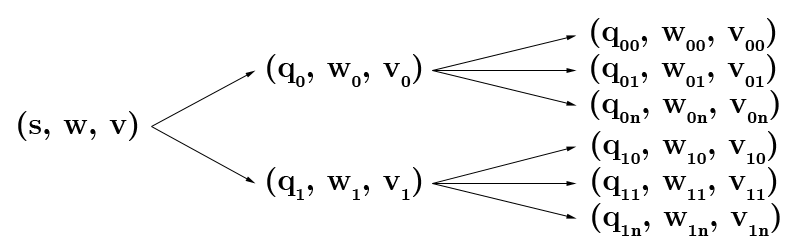
<style>
.page{position:relative;width:794px;height:252px;background:#ffffff}
.page>*{position:absolute;margin:0}
.t1{font:30px "CMUSerif-Bold";color:#000000}
</style>
<div class="page">
<p class="t1" style="left:591px;top:18px;width:188px;height:105px">(q00, w00, v00)<br>(q01, w01, v01)<br>(q0n, w0n, v0n)</p>
<p class="t1" style="left:267px;top:54px;width:155px;height:33px">(q0, w0, v0)</p>
<p class="t1" style="left:18px;top:111px;width:120px;height:30px">(s, w, v)</p>
<p class="t1" style="left:592px;top:131px;width:188px;height:105px">(q10, w10, v10)<br>(q11, w11, v11)<br>(q1n, w1n, v1n)</p>
<p class="t1" style="left:267px;top:167px;width:155px;height:33px">(q1, w1, v1)</p>
</div>
